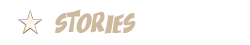
<style>
.page{position:relative;width:250px;height:45px;background:#ffffff}
.page>*{position:absolute;margin:0}
.t1{font:30px "HoustonComicsPersonalUse";color:#cdb99d}
</style>
<div class="page">
<p class="t1" style="left:55px;top:9px;width:81px;height:25px">STORIES</p>
</div>
